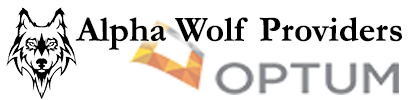
<style>
.page{position:relative;width:410px;height:100px;background:#ffffff}
.page>*{position:absolute;margin:0}
.t1{font:36px "Garamond-Bold";color:#000000}
</style>
<div class="page">
<p class="t1" style="left:75px;top:17px;width:327px;height:33px">Alpha Wolf Providers</p>
</div>
